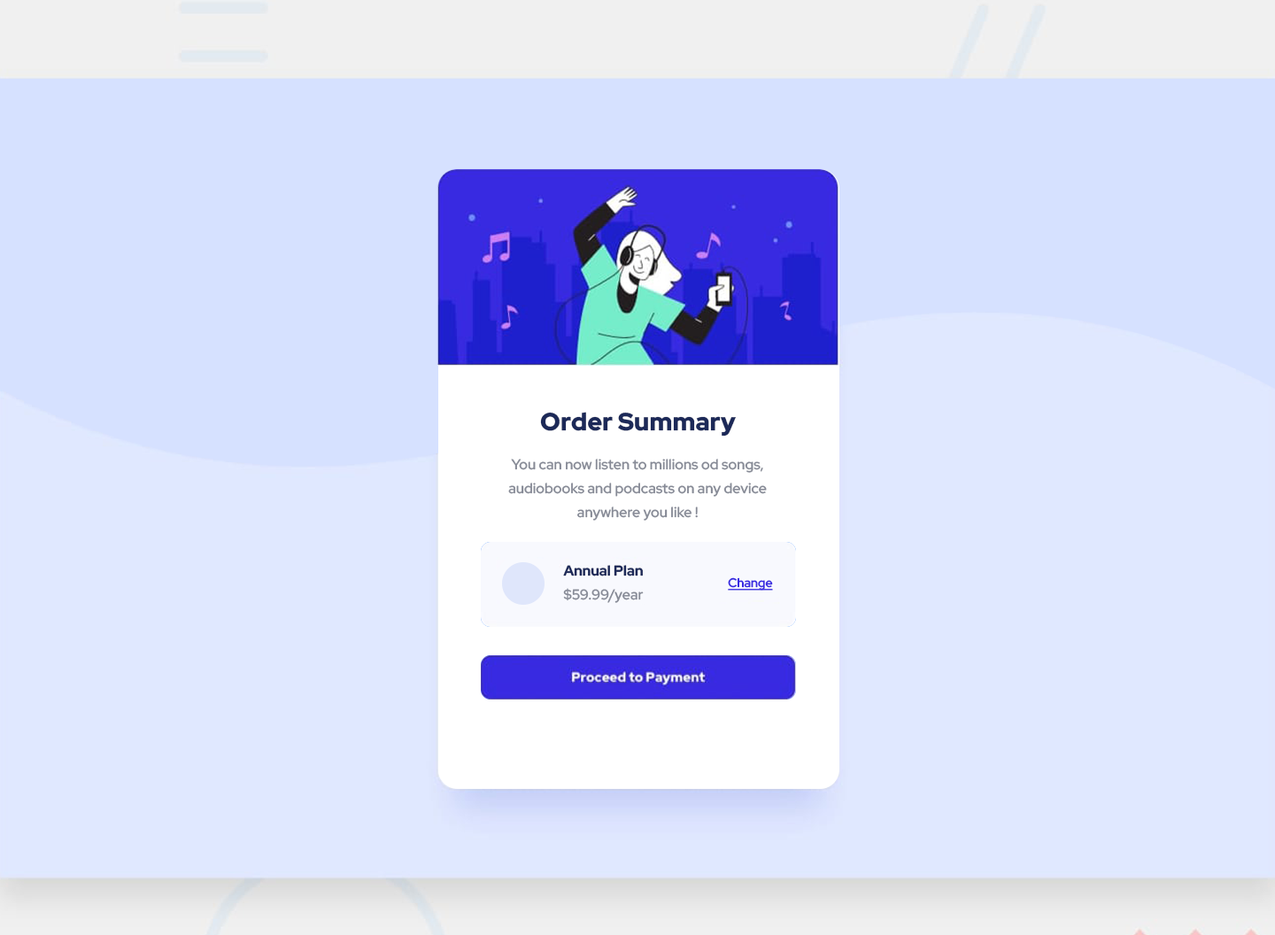
<style>
.page{position:relative;width:1275px;height:935px;background:#e0e8ff}
.page>*{position:absolute;margin:0}
.t1{font:24.8px "RedHatDisplayRoman-Black";letter-spacing:0.005em;color:#1c2958}
.t2{font:14.2px/23.9px "RedHatDisplayRoman-Medium";letter-spacing:0.005em;color:#868a96}
.t3{font:14.2px "RedHatDisplayRoman-Bold";letter-spacing:0.005em;color:#1c2958}
.t4{font:12.4px "RedHatDisplayRoman-Medium";letter-spacing:0.005em;color:#382ae1;text-decoration:underline}
.t5{font:14.2px "RedHatDisplayRoman-Medium";letter-spacing:0.005em;color:#868a96}
</style>
<div class="page">
<p class="t1" style="left:540px;top:412px;width:196px;height:25px">Order Summary</p>
<p class="t2" style="left:508px;top:459px;width:259px;height:62px;text-align:center">You can now listen to millions od songs,<br>audiobooks and podcasts on any device <br>anywhere you like !</p>
<p class="t3" style="left:563px;top:565px;width:80px;height:11px">Annual Plan</p>
<p class="t4" style="left:728px;top:577px;width:45px;height:14px">Change</p>
<p class="t5" style="left:563px;top:588px;width:81px;height:15px">$59.99/year</p>
</div>
